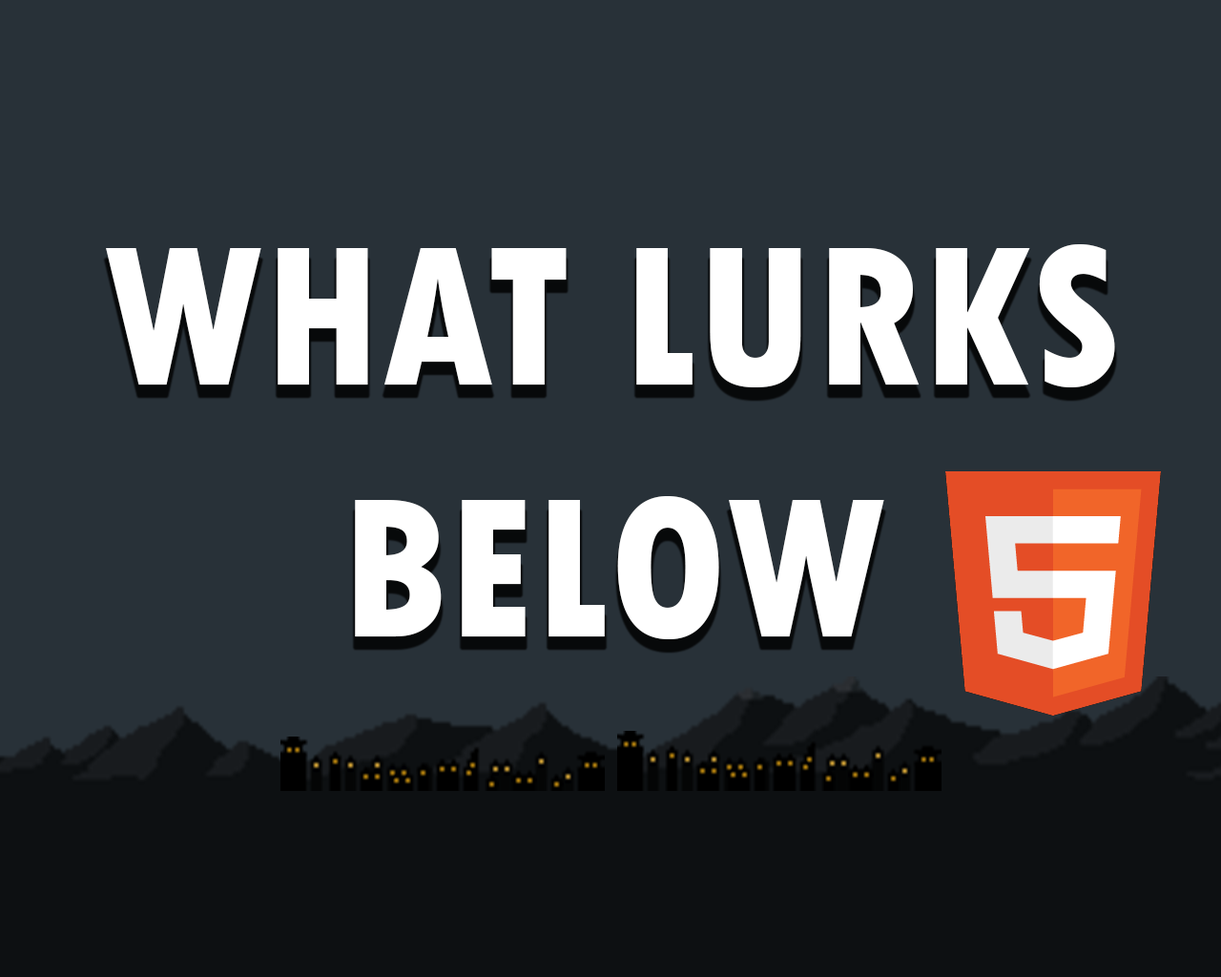
<style>
.page{position:relative;width:1221px;height:977px;background:#283138}
.page>*{position:absolute;margin:0}
.t1{font:209.8px "TwCenMT-CondensedExtraBold";color:#ffffff}
</style>
<div class="page">
<p class="t1" style="left:106px;top:244px;width:1009px;height:395px;text-align:center">WHAT LURKS<br>BELOW</p>
</div>
